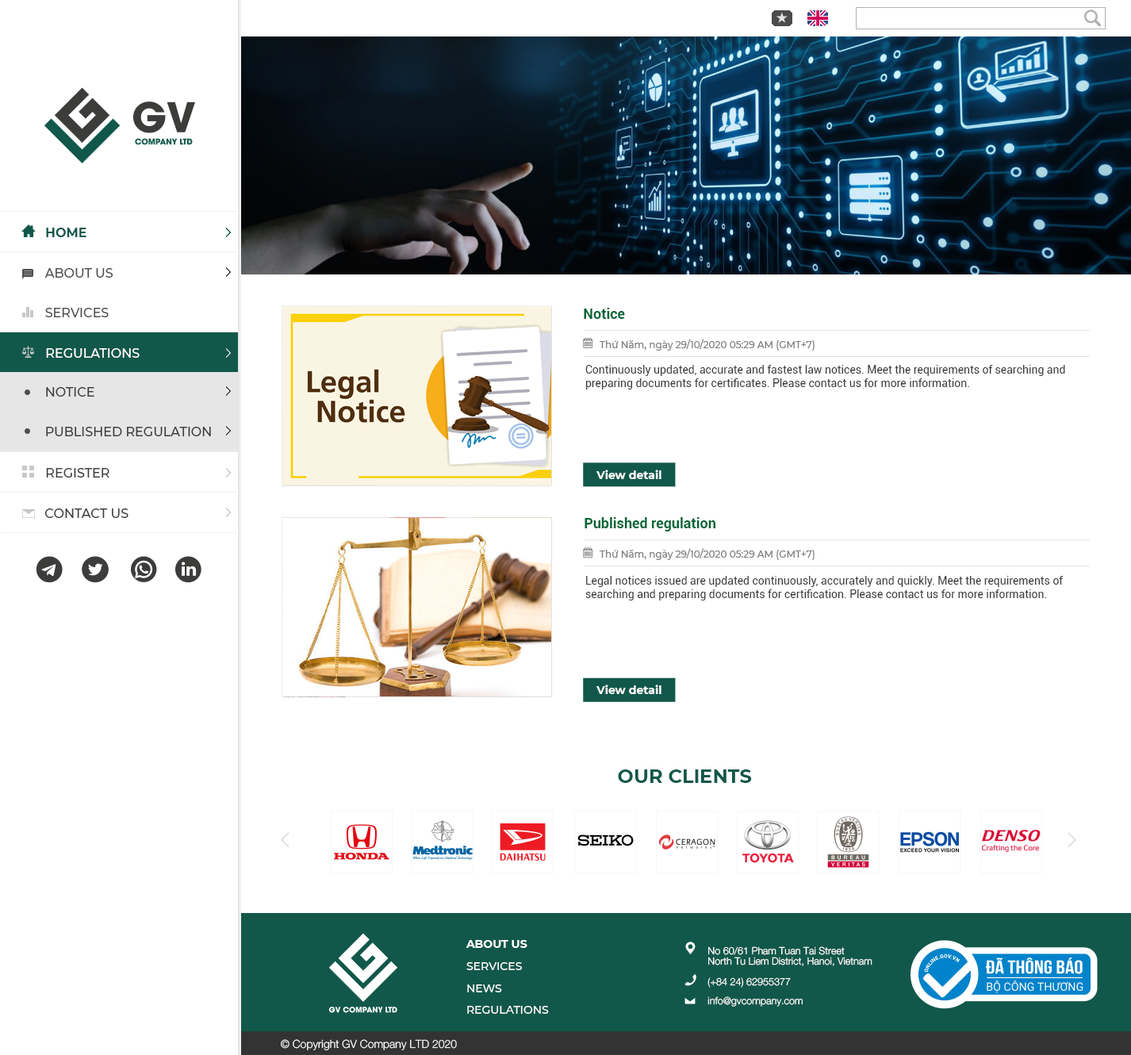
<style>
.page{position:relative;width:1131px;height:1055px;background:#ffffff}
.page>*{position:absolute;margin:0}
.t1{font:12.7px "Montserrat-Bold";color:#11584a}
.t2{font:12.7px "Montserrat-Medium";color:#4d4d4c}
.t3{font:14.3px "Roboto-Bold";color:#006635}
.t4{font:9.5px "Montserrat-Medium";color:#808080}
.t5{font:12.7px "Montserrat-Medium";color:#ffffff}
.t6{font:11.1px "Roboto-Regular";color:#3c3c3b}
.t7{font:12.7px "Montserrat-Medium";color:#3c3c3b}
.t8{font:11.1px "Montserrat-Bold";color:#ffffff}
.t9{font:19px "Montserrat-Bold";color:#11584a}
.t10{font:10px/10.9px "Oxydesign-HE45-Light";color:#ffffff}
.t11{font:11.1px "Montserrat-Medium";color:#ffffff}
.t12{font:10px "Oxydesign-HE45-Light";color:#ffffff}
.t13{font:11.1px "Oxydesign-HE45-Light";color:#ffffff}
</style>
<div class="page">
<p class="t1" style="left:46px;top:228px;width:40px;height:9px">HOME</p>
<p class="t2" style="left:44px;top:268px;width:69px;height:10px">ABOUT US</p>
<p class="t2" style="left:45px;top:308px;width:64px;height:9px">SERVICES</p>
<p class="t3" style="left:584px;top:308px;width:41px;height:11px">Notice</p>
<p class="t4" style="left:599px;top:339px;width:215px;height:11px">Thứ Năm, ngày 29/10/2020 05:29 AM (GMT+7)</p>
<p class="t5" style="left:46px;top:348px;width:94px;height:10px">REGULATIONS</p>
<p class="t6" style="left:585px;top:365px;width:480px;height:24px">Continuously updated, accurate and fastest law notices. Meet the requirements of searching and preparing documents for certificates. Please contact us for more information.</p>
<p class="t7" style="left:46px;top:387px;width:48px;height:9px">NOTICE</p>
<p class="t7" style="left:46px;top:427px;width:165px;height:9px">PUBLISHED REGULATION</p>
<p class="t7" style="left:46px;top:468px;width:63px;height:9px">REGISTER</p>
<p class="t8" style="left:596px;top:469px;width:65px;height:10px">View detail</p>
<p class="t7" style="left:44px;top:508px;width:84px;height:10px">CONTACT US</p>
<p class="t3" style="left:584px;top:517px;width:131px;height:14px">Published regulation</p>
<p class="t4" style="left:599px;top:548px;width:215px;height:12px">Thứ Năm, ngày 29/10/2020 05:29 AM (GMT+7)</p>
<p class="t6" style="left:585px;top:576px;width:478px;height:24px">Legal notices issued are updated continuously, accurately and quickly. Meet the requirements of searching and preparing documents for certification. Please contact us for more information.</p>
<p class="t8" style="left:596px;top:684px;width:65px;height:10px">View detail</p>
<p class="t9" style="left:618px;top:769px;width:134px;height:14px">OUR CLIENTS</p>
<p class="t8" style="left:465px;top:940px;width:62px;height:8px">ABOUT US</p>
<p class="t10" style="left:708px;top:946px;width:164px;height:20px">No 60/61 Pham Tuan Tai Street<br>North Tu Liem District, Hanoi, Vietnam</p>
<p class="t11" style="left:466px;top:962px;width:56px;height:8px">SERVICES</p>
<p class="t12" style="left:707px;top:977px;width:84px;height:10px">(+84 24) 62955377</p>
<p class="t11" style="left:467px;top:984px;width:35px;height:8px">NEWS</p>
<p class="t12" style="left:707px;top:996px;width:95px;height:10px">info@gvcompany.com</p>
<p class="t11" style="left:467px;top:1005px;width:82px;height:8px">REGULATIONS</p>
<p class="t13" style="left:281px;top:1039px;width:176px;height:12px">© Copyright GV Company LTD 2020</p>
</div>
